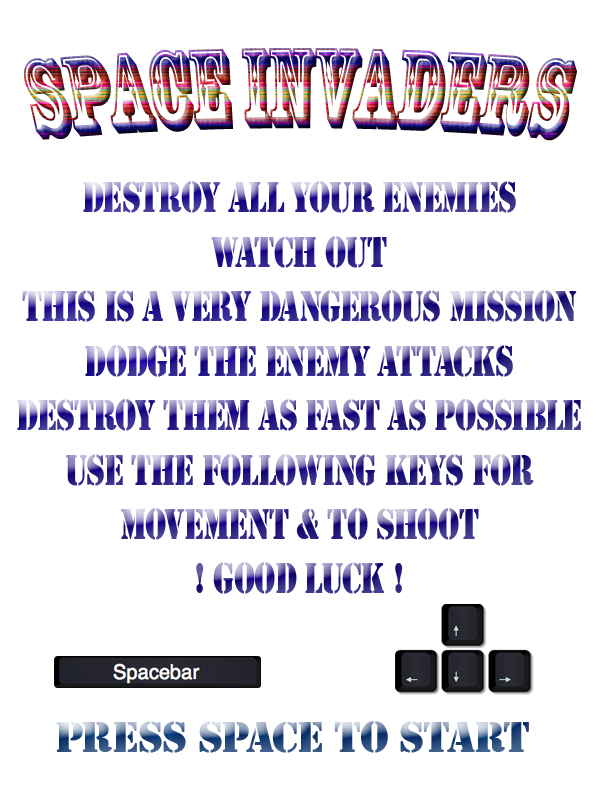
<style>
.page{position:relative;width:600px;height:800px;background:#ffffff}
.page>*{position:absolute;margin:0}
.t1{font:106.3px "RosewoodStd-Regular";letter-spacing:-0.01em;scale:0.63 1}
.t2{font:45.4px "Stencil";letter-spacing:-0.01em;scale:0.74 1}
.t3{font:45.4px "Stencil";letter-spacing:-0.01em}
</style>
<div class="page">
<p class="t1" style="left:24px;top:48px;width:553px;height:93px">Space Invaders</p>
<p class="t2" style="left:17px;top:181px;width:564px;height:413px;text-align:center">destroy all your enemies<br><br>Watch out<br><br>this is a very dangerous Mission<br><br>Dodge The enemy attacks<br><br>destroy them as fast as possible<br><br>Use the following keys for<br><br>movement &amp; to shoot<br><br>! Good luck !</p>
<p class="t3" style="left:56px;top:721px;width:473px;height:32px">press space to start</p>
</div>
